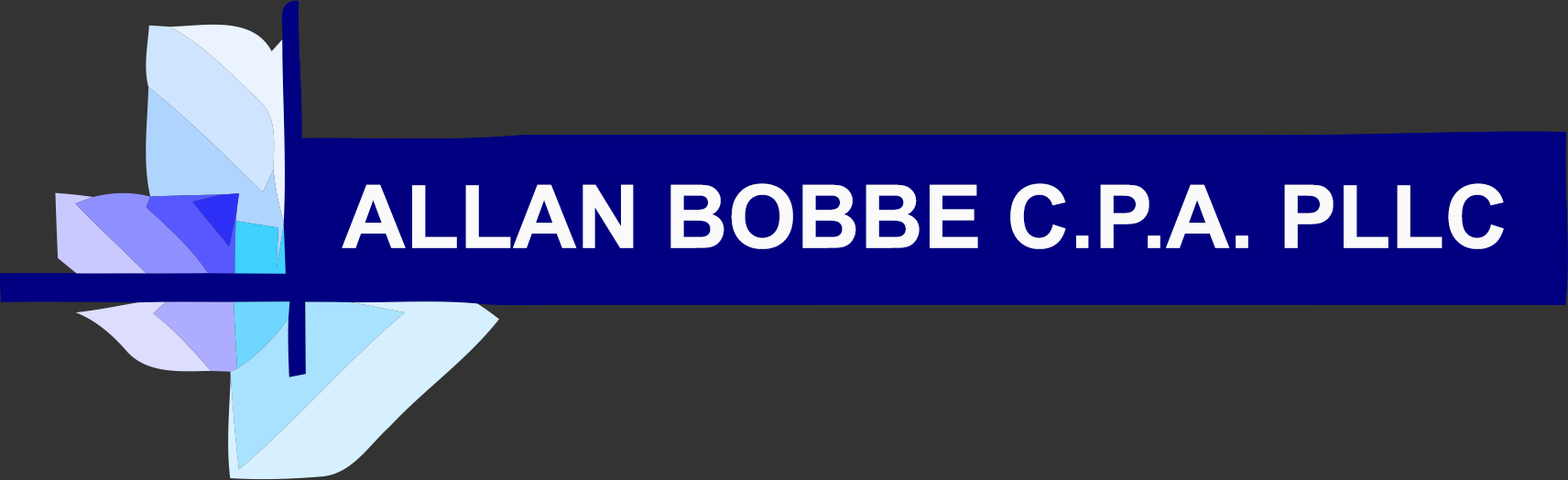
<style>
.page{position:relative;width:1568px;height:480px;background:#333333}
.page>*{position:absolute;margin:0}
.t1{font:87.9px "Arial-BoldMT";color:#fafafa}
</style>
<div class="page">
<p class="t1" style="left:342px;top:183px;width:1162px;height:66px">ALLAN BOBBE C.P.A. PLLC</p>
</div>
